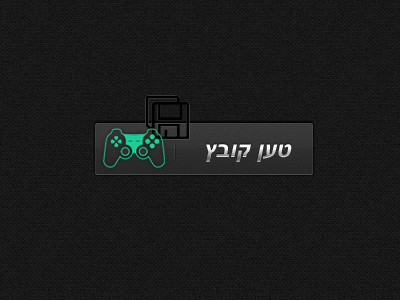
<style>
.page{position:relative;width:400px;height:300px}
.page>*{position:absolute;margin:0}
.t1{font:24px "Arial-BoldItalicMT"}
</style>
<div class="page">
<p class="t1" style="left:206px;top:144px;width:86px;height:18px">ץבוק ןעט</p>
</div>
